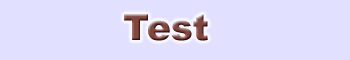
<style>
.page{position:relative;width:350px;height:60px;background:#e1e1ff}
.page>*{position:absolute;margin:0}
.t1{font:36px "Arial-Black"}
</style>
<div class="page">
<p class="t1" style="left:124px;top:14px;width:84px;height:27px">Test</p>
</div>
